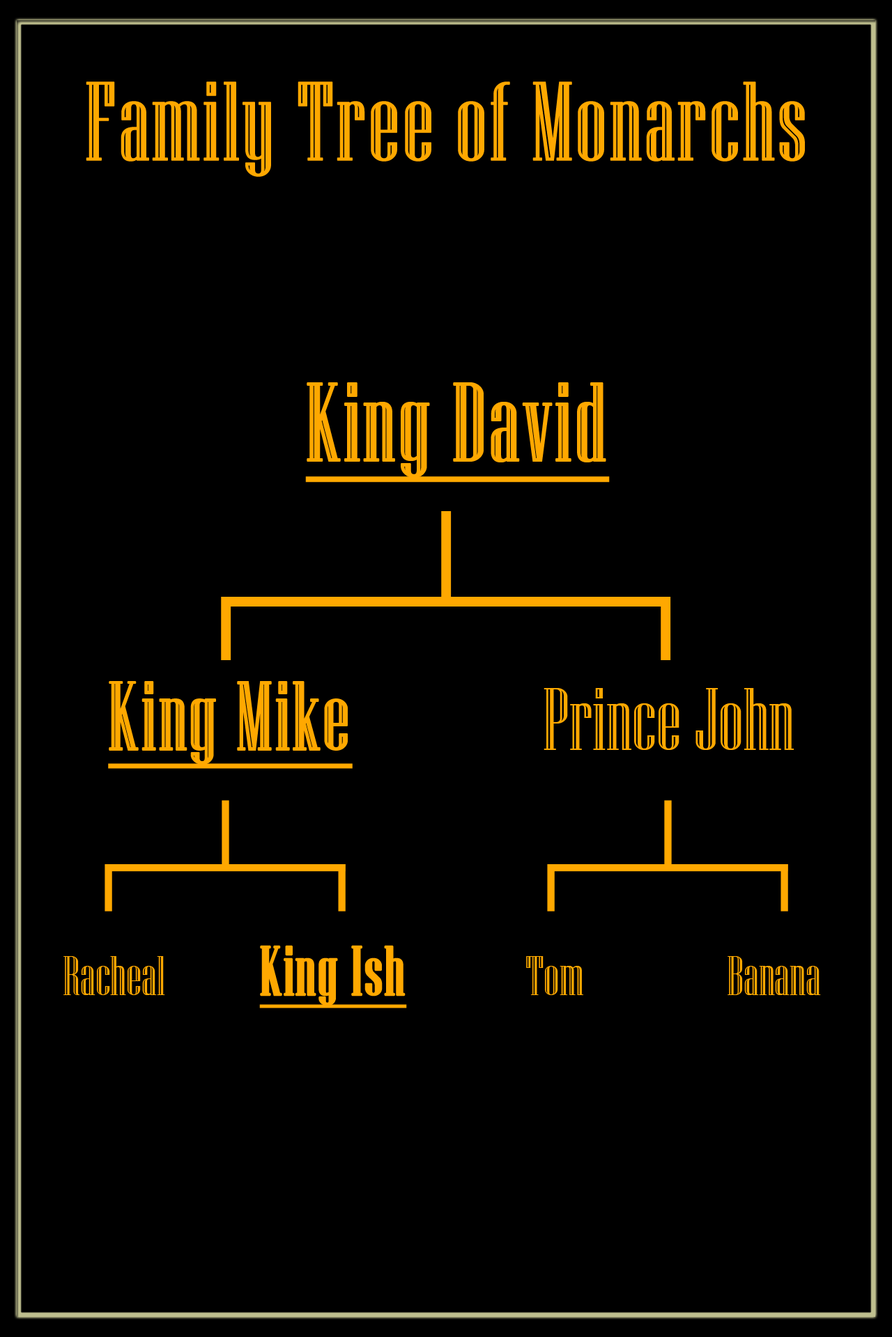
<style>
.page{position:relative;width:892px;height:1337px;background:#000000}
.page>*{position:absolute;margin:0}
.t1{font:111.5px "NiagaraEngraved-Reg";color:#ffa800;font-weight:bold}
.t2{font:111.5px "NiagaraEngraved-Reg";color:#ffa800;font-weight:bold;text-decoration:underline}
.t3{font:97.5px "NiagaraEngraved-Reg";color:#ffa800;font-weight:bold;text-decoration:underline}
.t4{font:89.2px "NiagaraEngraved-Reg";color:#ffa800}
.t5{font:69.7px "NiagaraEngraved-Reg";color:#ffa800;font-weight:bold;text-decoration:underline}
.t6{font:55.7px "NiagaraEngraved-Reg";color:#ffa800}
</style>
<div class="page">
<p class="t1" style="left:86px;top:81px;width:719px;height:96px">Family Tree of Monarchs</p>
<p class="t2" style="left:305px;top:382px;width:304px;height:101px">King David</p>
<p class="t3" style="left:108px;top:681px;width:244px;height:88px">King Mike</p>
<p class="t4" style="left:543px;top:688px;width:250px;height:62px">Prince John</p>
<p class="t5" style="left:259px;top:945px;width:148px;height:64px">King Ish</p>
<p class="t6" style="left:63px;top:956px;width:102px;height:39px">Racheal</p>
<p class="t6" style="left:526px;top:956px;width:57px;height:39px">Tom</p>
<p class="t6" style="left:727px;top:956px;width:94px;height:39px">Banana</p>
</div>
